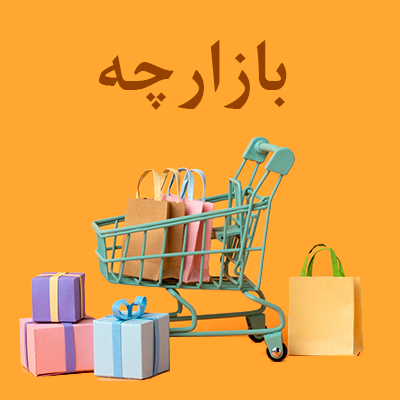
<style>
.page{position:relative;width:400px;height:400px;background:#ffa730}
.page>*{position:absolute;margin:0}
.t1{font:80px "BNazaninBold";color:#954100}
</style>
<div class="page">
<p class="t1" style="left:98px;top:40px;width:189px;height:70px">بازارچه</p>
</div>
